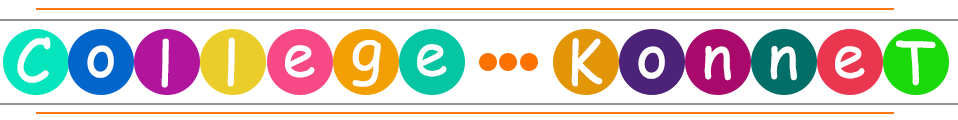
<style>
.page{position:relative;width:958px;height:120px;background:#ffffff}
.page>*{position:absolute;margin:0}
.t1{font:60px "ComicSansMS";color:#ffffff}
</style>
<div class="page">
<p class="t1" style="left:17px;top:37px;width:34px;height:46px">C</p>
<p class="t1" style="left:161px;top:38px;width:8px;height:50px">l</p>
<p class="t1" style="left:227px;top:37px;width:8px;height:50px">l</p>
<p class="t1" style="left:352px;top:40px;width:29px;height:47px">g</p>
<p class="t1" style="left:571px;top:38px;width:32px;height:49px">K</p>
<p class="t1" style="left:896px;top:40px;width:40px;height:46px">T</p>
<p class="t1" style="left:87px;top:45px;width:27px;height:33px">o</p>
<p class="t1" style="left:285px;top:45px;width:30px;height:33px">e</p>
<p class="t1" style="left:417px;top:44px;width:30px;height:33px">e</p>
<p class="t1" style="left:638px;top:46px;width:27px;height:33px">o</p>
<p class="t1" style="left:704px;top:46px;width:27px;height:35px">n</p>
<p class="t1" style="left:770px;top:46px;width:27px;height:35px">n</p>
<p class="t1" style="left:835px;top:46px;width:30px;height:33px">e</p>
</div>
